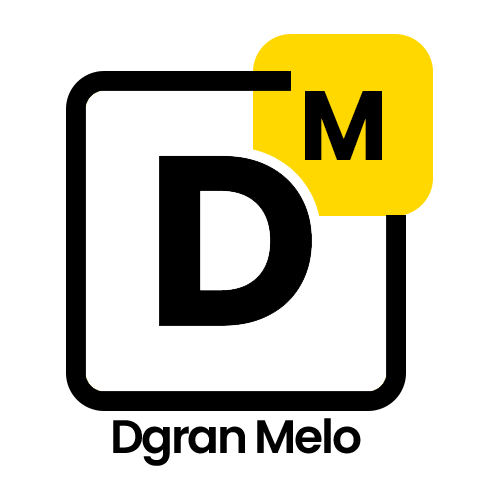
<style>
.page{position:relative;width:500px;height:500px;background:#ffffff}
.page>*{position:absolute;margin:0}
.t1{font:98.2px "Poppins-Bold";color:#000000}
.t2{font:47px "Poppins-SemiBold";letter-spacing:-0.05em;color:#000000}
</style>
<div class="page">
<p class="t1" style="left:305px;top:91px;width:77px;height:69px">M</p>
<p class="t2" style="left:113px;top:418px;width:248px;height:48px">Dgran Melo</p>
</div>
